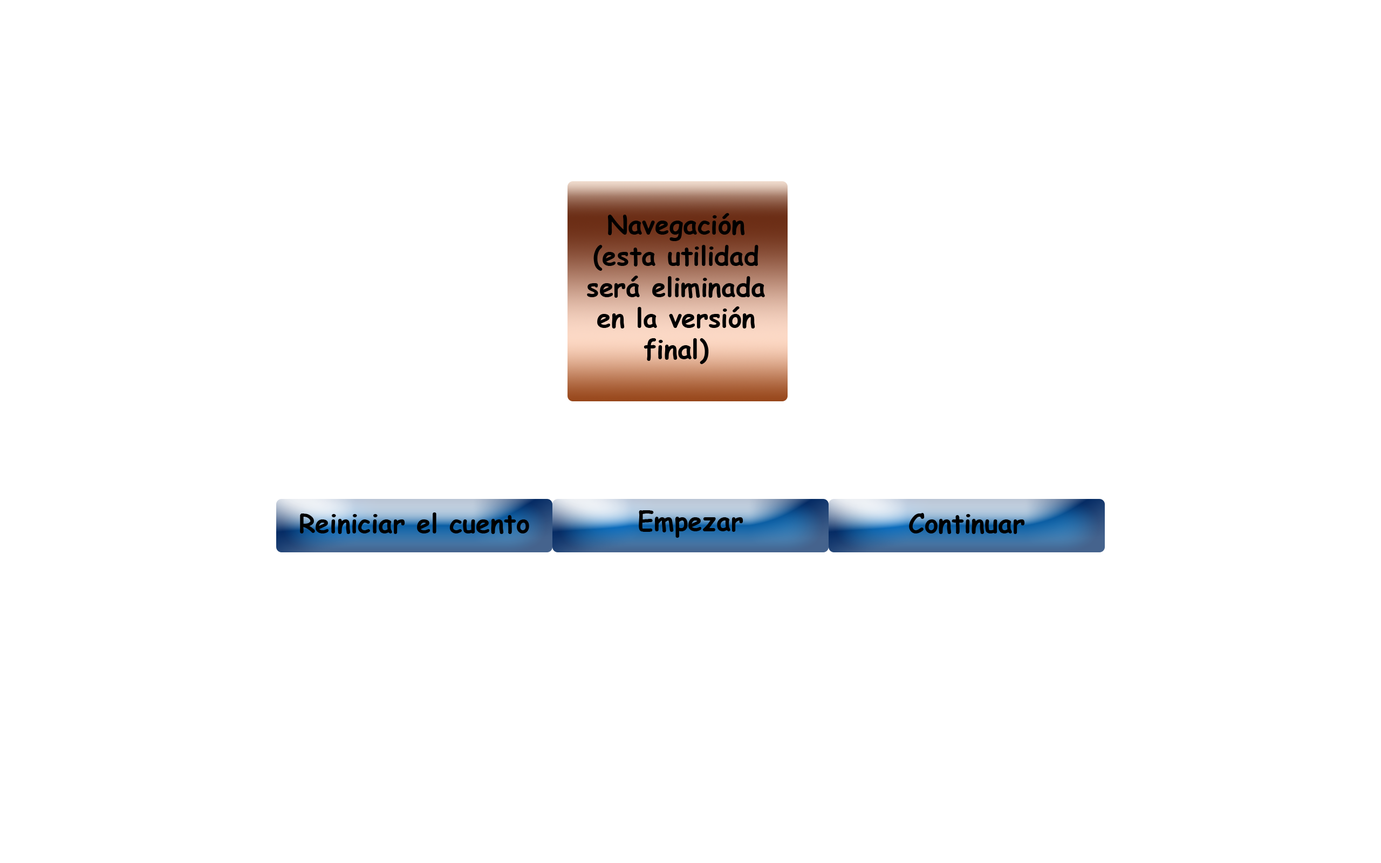
<style>
.page{position:relative;width:1381px;height:863px;background:#ffffff}
.page>*{position:absolute;margin:0}
.t1{font:25.9px "ComicSansMS-Bold";color:#000000}
</style>
<div class="page">
<p class="t1" style="left:587px;top:213px;width:178px;height:151px;text-align:center">Navegación<br>(esta utilidad<br>será eliminada<br>en la versión<br>final)</p>
<p class="t1" style="left:300px;top:513px;width:229px;height:21px">Reiniciar el cuento</p>
<p class="t1" style="left:639px;top:510px;width:105px;height:28px">Empezar</p>
<p class="t1" style="left:909px;top:513px;width:116px;height:21px">Continuar</p>
</div>
